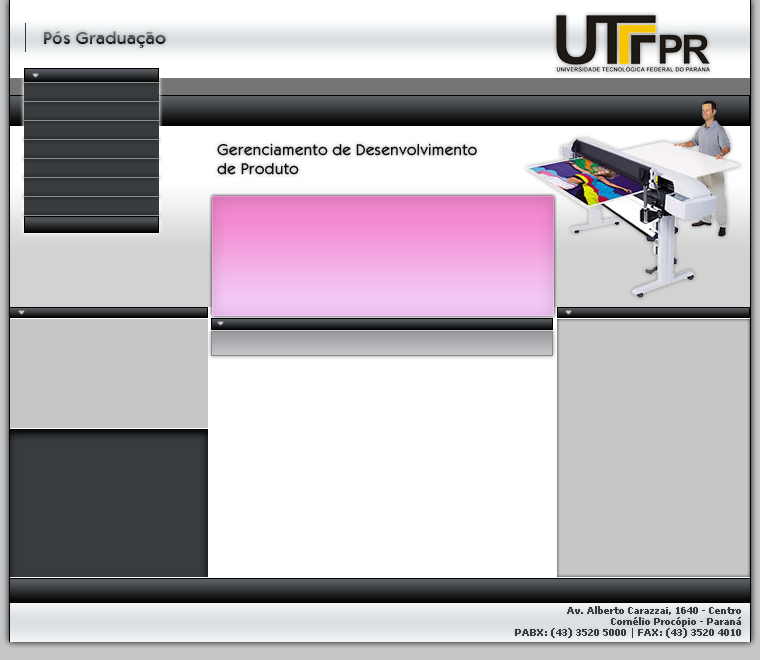
<style>
.page{position:relative;width:760px;height:660px;background:#ffffff}
.page>*{position:absolute;margin:0}
.t1{font:18px "Kabob"}
.t2{font:16px "KabobRegular";color:#0e0e0f}
.t3{font:9px "Verdana-Bold";color:#393c3f}
</style>
<div class="page">
<p class="t1" style="left:44px;top:31px;width:122px;height:17px">Pós Graduação</p>
<p class="t2" style="left:217px;top:143px;width:260px;height:32px">Gerenciamento de Desenvolvimento <br>de Produto</p>
<p class="t3" style="left:515px;top:606px;width:226px;height:32px;text-align:right">Av. Alberto Carazzai, 1640 - Centro<br>Cornélio Procópio - Paraná<br>PABX: (43) 3520 5000 | FAX: (43) 3520 4010</p>
</div>
